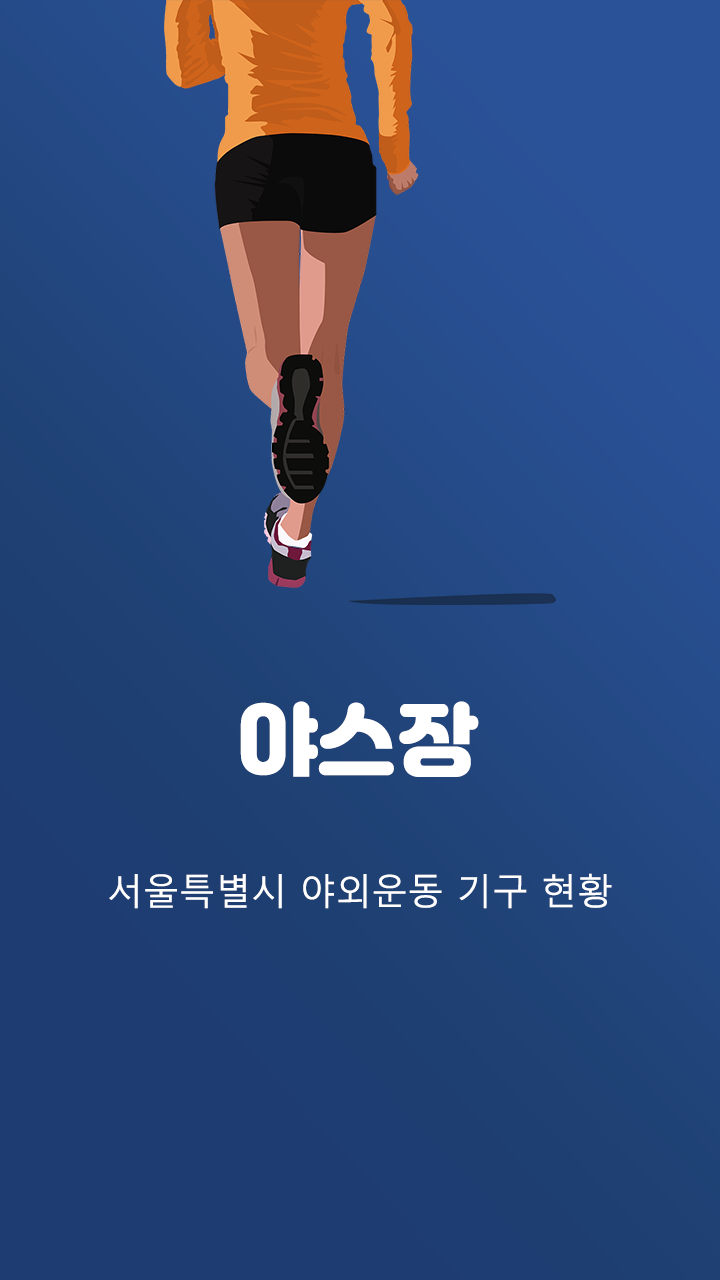
<style>
.page{position:relative;width:720px;height:1280px}
.page>*{position:absolute;margin:0}
.t1{font:80px "Jalnan";color:#ffffff}
.t2{font:36px "MalgunGothic";color:#ffffff}
</style>
<div class="page">
<p class="t1" style="left:240px;top:701px;width:239px;height:76px">야스장</p>
<p class="t2" style="left:109px;top:873px;width:503px;height:36px">서울특별시 야외운동 기구 현황</p>
</div>
